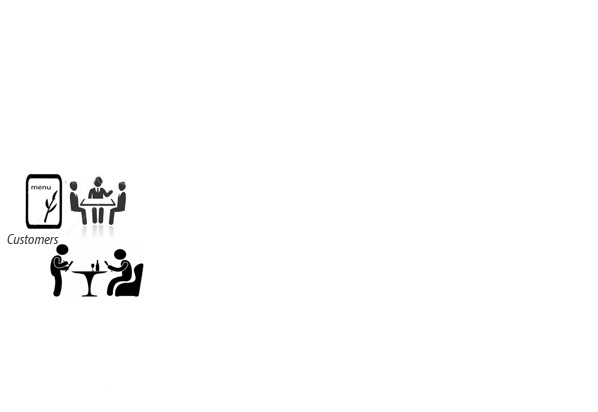
<style>
.page{position:relative;width:598px;height:412px;background:#ffffff}
.page>*{position:absolute;margin:0}
.t1{font:14px "MyriadWebPro-CondensedItalic";color:#47484a}
</style>
<div class="page">
<p class="t1" style="left:7px;top:234px;width:52px;height:10px">Customers</p>
</div>
